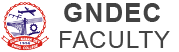
<style>
.page{position:relative;width:179px;height:52px;background:#ffffff}
.page>*{position:absolute;margin:0}
.t1{font:26px "Arial-BoldMT";letter-spacing:0.04em;color:#424242}
.t2{font:24px "ArialMT";letter-spacing:0.04em;color:#424242}
</style>
<div class="page">
<p class="t1" style="left:64px;top:3px;width:96px;height:19px">GNDEC</p>
<p class="t2" style="left:60px;top:31px;width:110px;height:17px">FACULTY</p>
</div>
